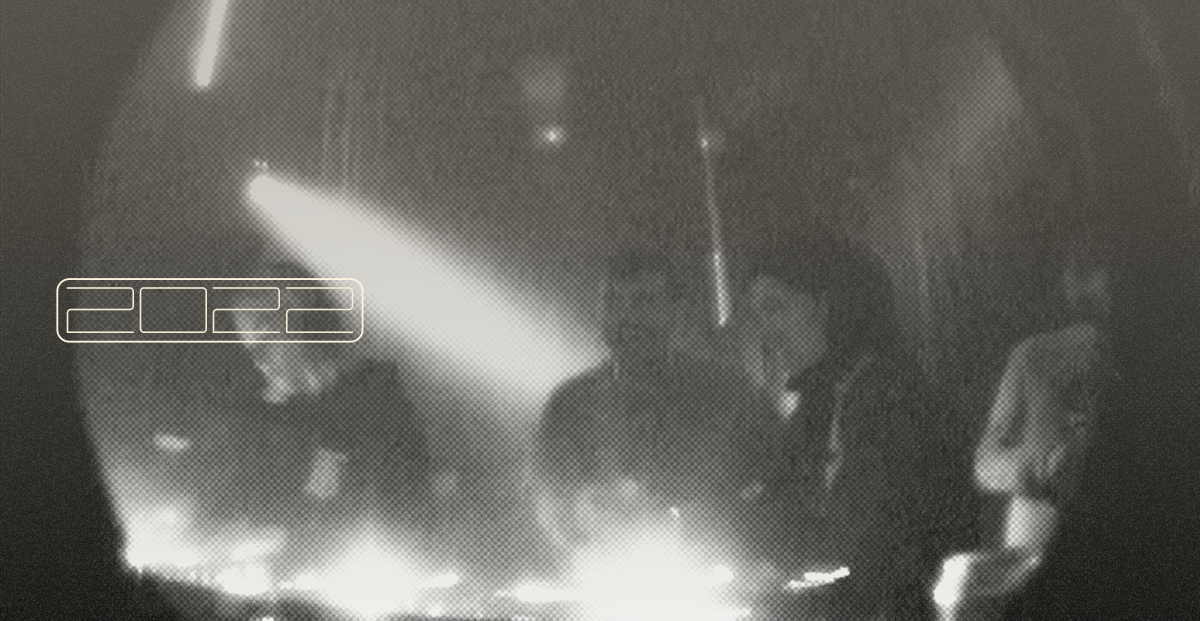
<style>
.page{position:relative;width:1200px;height:621px}
.page>*{position:absolute;margin:0}
.t1{font:65.4px "CYBER2K-Regular";letter-spacing:-0.01em;color:#f5ecd5}
</style>
<div class="page">
<p class="t1" style="left:66px;top:287px;width:288px;height:46px">2022</p>
</div>
